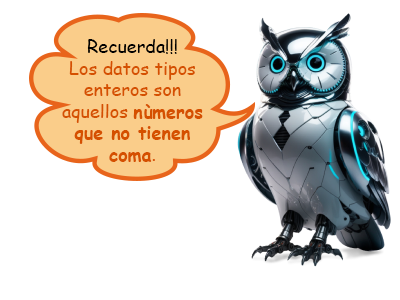
<style>
.page{position:relative;width:400px;height:300px;background:#ffffff}
.page>*{position:absolute;margin:0}
.t1{font:18px "ComicSansMS";color:#d55000}
.t2{font:18px "ComicSansMS";color:#000000}
.t3{font:18px "ComicSansMS-Bold";color:#d55000}
</style>
<div class="page">
<p class="t1" style="left:62px;top:39px;width:141px;height:123px;text-align:center"><span class="t2">Recuerda!!!<br></span>Los datos tipos enteros son aquellos <span class="t3">nùmeros que no tienen coma</span>.</p>
</div>
